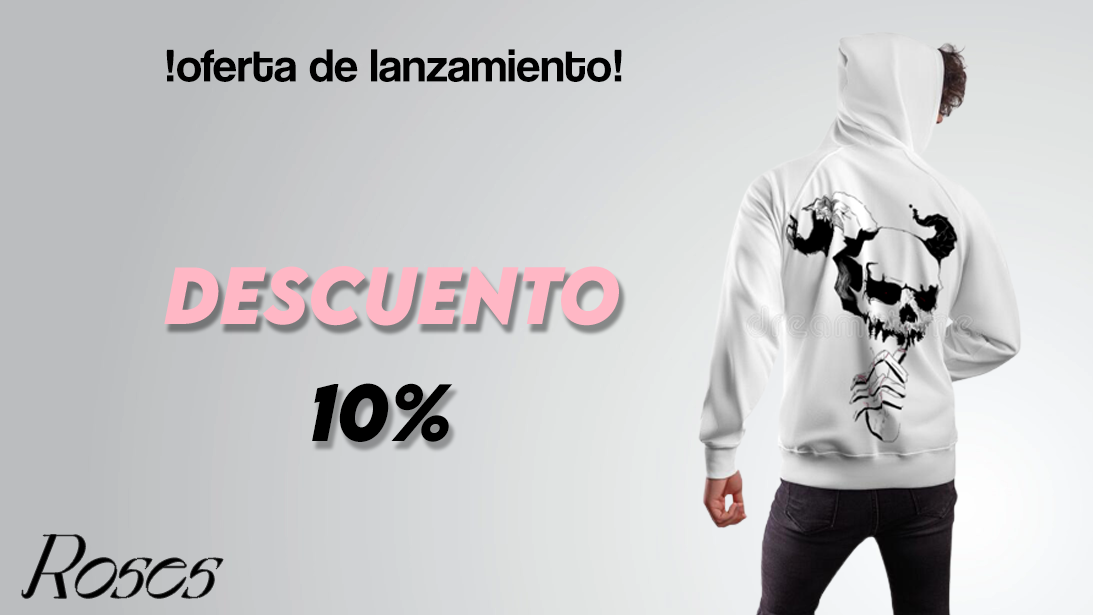
<style>
.page{position:relative;width:1093px;height:615px}
.page>*{position:absolute;margin:0}
.t1{font:48px "CoolveticaRg-Regular";color:#000000}
.t2{font:72px "LEMONMILK-BoldItalic";color:#000000}
.t3{font:84.4px "OttoAttacType-Regular";color:#000000;scale:0.93 1}
</style>
<div class="page">
<p class="t1" style="left:166px;top:49px;width:456px;height:33px">!oferta de lanzamiento!</p>
<p class="t2" style="left:312px;top:383px;width:141px;height:59px">10%</p>
<p class="t3" style="left:22px;top:535px;width:201px;height:63px">Roses</p>
</div>
